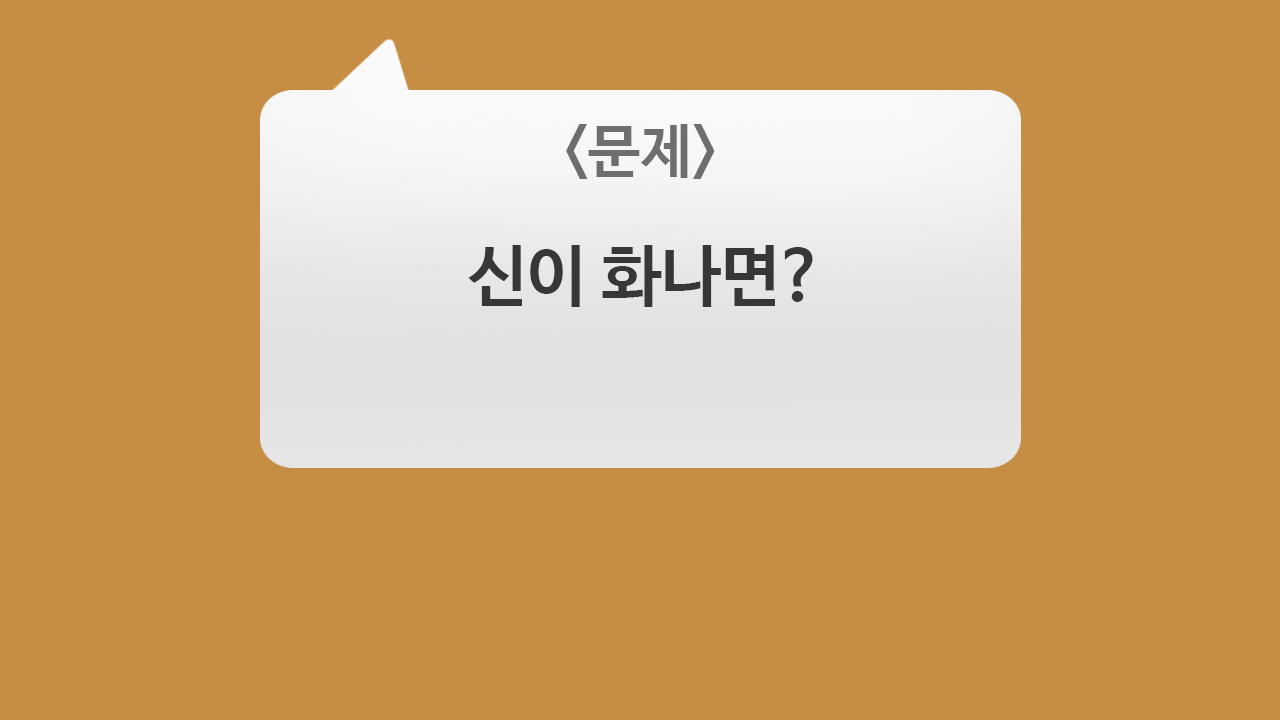
<style>
.page{position:relative;width:1280px;height:720px;background:#c58e44}
.page>*{position:absolute;margin:0}
.t1{font:58.3px "NanumBarunGothicBold";color:#6e6e6e}
.t2{font:66.7px "NanumBarunGothicBold";color:#373737}
</style>
<div class="page">
<p class="t1" style="left:566px;top:124px;width:149px;height:55px">&lt;문제&gt;</p>
<p class="t2" style="left:468px;top:245px;width:345px;height:62px">신이 화나면?</p>
</div>
